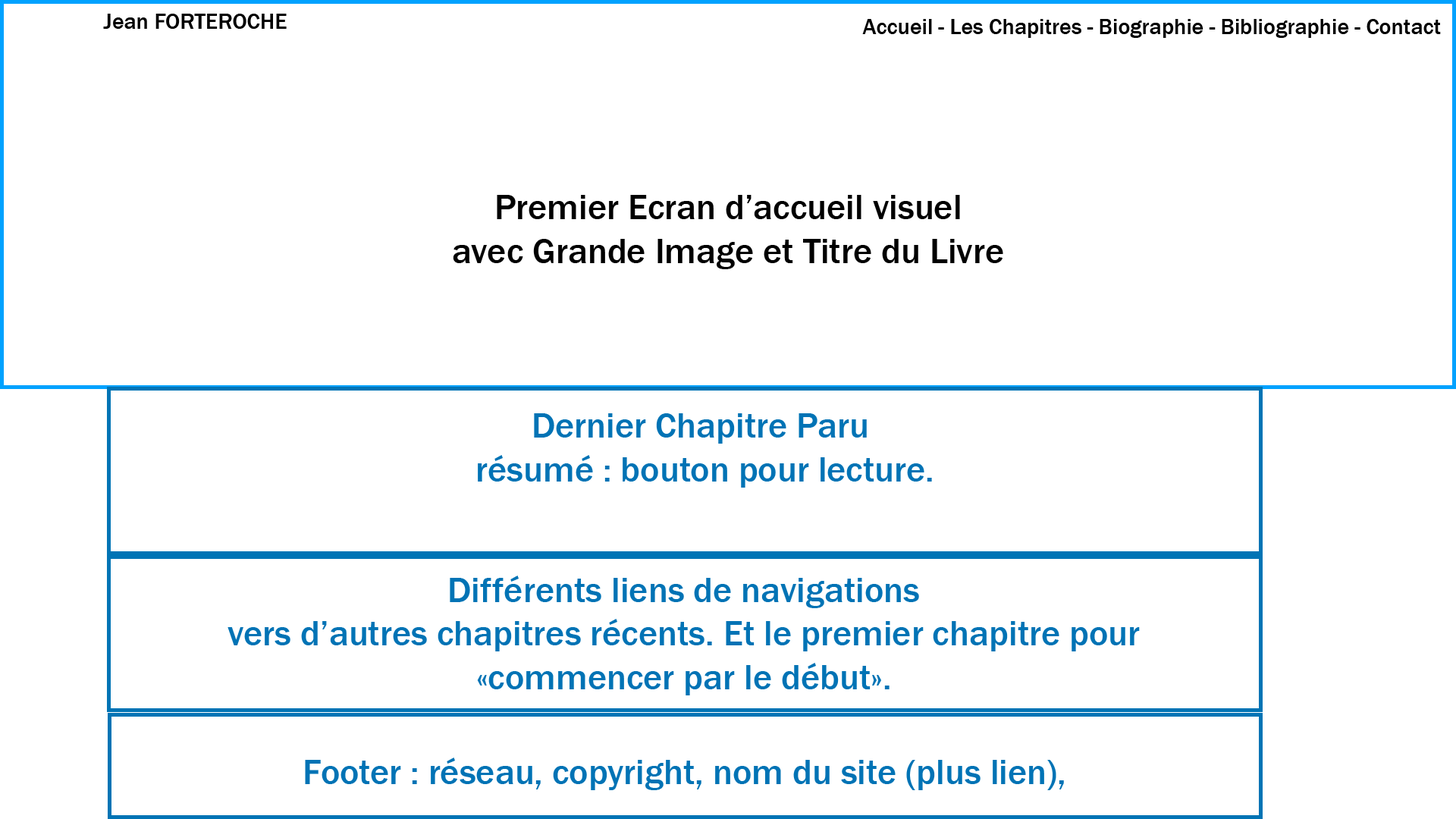
<style>
.page{position:relative;width:1456px;height:819px;background:#ffffff}
.page>*{position:absolute;margin:0}
.t1{font:22.7px "FranklinGothic-Medium";color:#000000}
.t2{font:36.4px "FranklinGothic-Medium";color:#000000}
.t3{font:36.4px "FranklinGothic-Medium";color:#0073b5}
</style>
<div class="page">
<p class="t1" style="left:103px;top:14px;width:184px;height:15px">Jean FORTEROCHE</p>
<p class="t1" style="left:862px;top:19px;width:579px;height:19px">Accueil - Les Chapitres - Biographie - Bibliographie - Contact</p>
<p class="t2" style="left:453px;top:195px;width:550px;height:74px;text-align:center">Premier Ecran d’accueil visuel<br>avec Grande Image et Titre du Livre</p>
<p class="t3" style="left:478px;top:413px;width:454px;height:75px;text-align:center">Dernier Chapitre Paru <br>résumé : bouton pour lecture.</p>
<p class="t3" style="left:227px;top:576px;width:913px;height:119px;text-align:center">Différents liens de navigations<br>vers d’autres chapitres récents. Et le premier chapitre pour<br>«commencer par le début».</p>
<p class="t3" style="left:305px;top:758px;width:759px;height:32px">Footer : réseau, copyright, nom du site (plus lien),</p>
</div>
